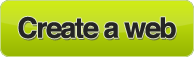
<style>
.page{position:relative;width:194px;height:57px}
.page>*{position:absolute;margin:0}
.t1{font:28.3px "Helvetica-Bold";letter-spacing:-0.05em;color:#252525}
</style>
<div class="page">
<p class="t1" style="left:18px;top:16px;width:158px;height:23px">Create a web</p>
<p class="t1" style="left:18px;top:16px;width:158px;height:23px">Create a web</p>
</div>
